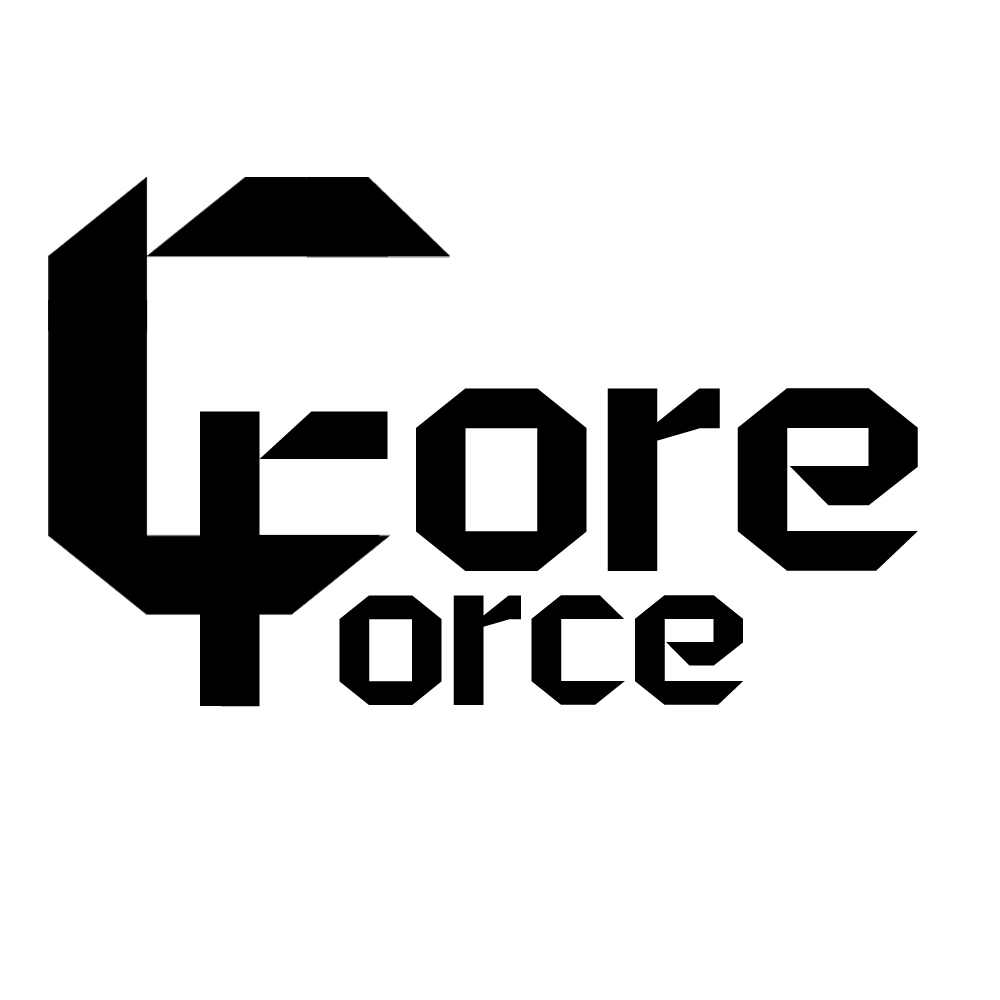
<style>
.page{position:relative;width:1000px;height:1000px;background:#ffffff}
.page>*{position:absolute;margin:0}
.t1{font:330.1px "Suntech-Stencil";color:#000000}
.t2{font:396.1px "Suntech-Stencil";color:#000000}
.t3{font:198px "Suntech-Stencil";color:#000000}
</style>
<div class="page">
<p class="t1" style="left:416px;top:388px;width:502px;height:183px">ore</p>
<p class="t2" style="left:200px;top:411px;width:188px;height:296px">F</p>
<p class="t3" style="left:339px;top:595px;width:404px;height:110px">orce</p>
</div>
